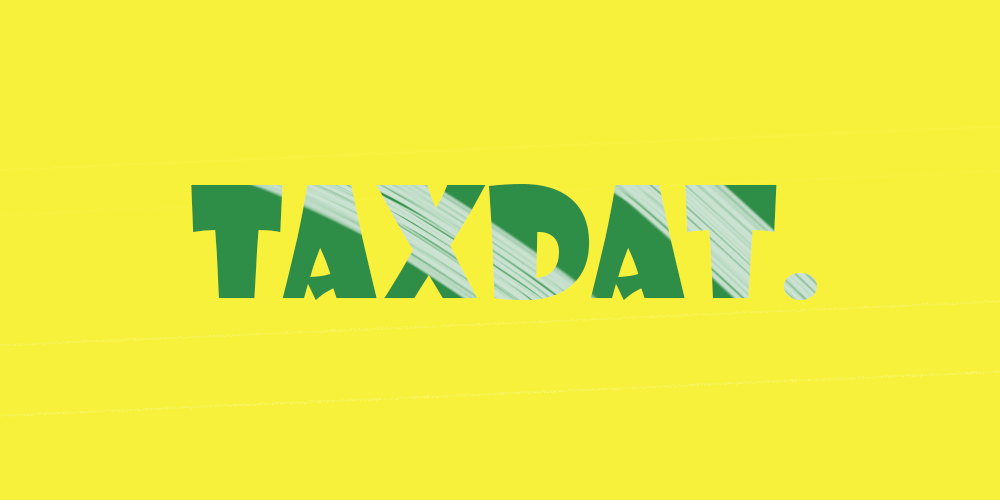
<style>
.page{position:relative;width:1000px;height:500px;background:#f7f13c}
.page>*{position:absolute;margin:0}
.t1{font:150px "ShowcardGothic-Reg"}
</style>
<div class="page">
<p class="t1" style="left:191px;top:184px;width:626px;height:117px">TaxDat.</p>
</div>
